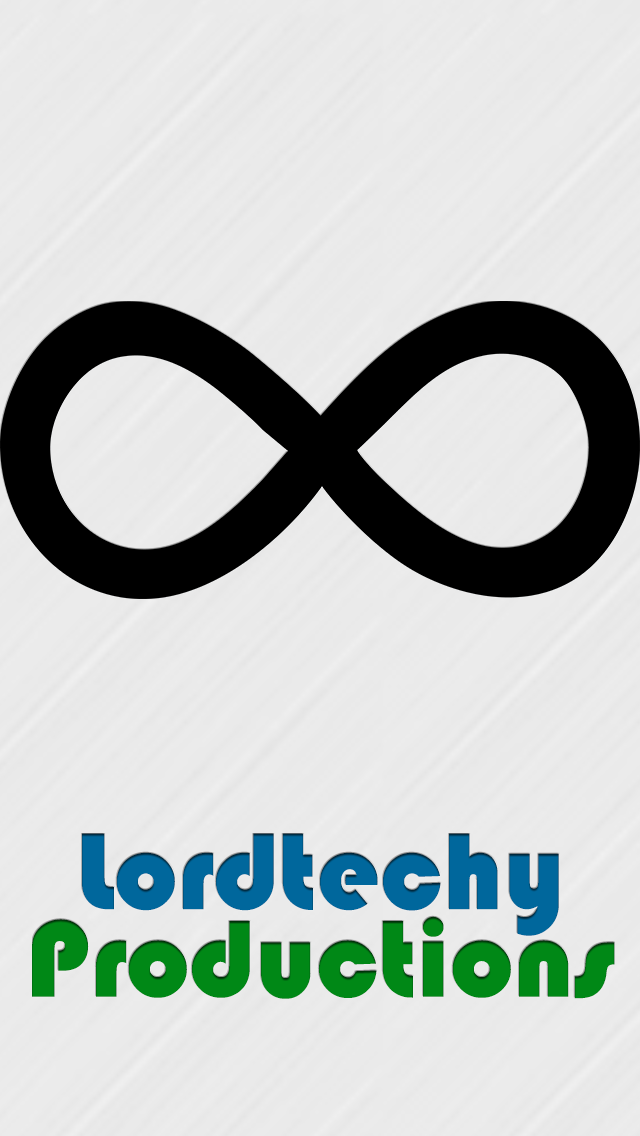
<style>
.page{position:relative;width:640px;height:1136px;background:#eaeaea}
.page>*{position:absolute;margin:0}
.t1{font:113.2px "Bauhaus93";color:#008816}
.t2{font:113.2px "Bauhaus93";color:#00679c}
</style>
<div class="page">
<p class="t1" style="left:32px;top:833px;width:583px;height:166px"><span class="t2">Lordtechy </span>Productions</p>
</div>
